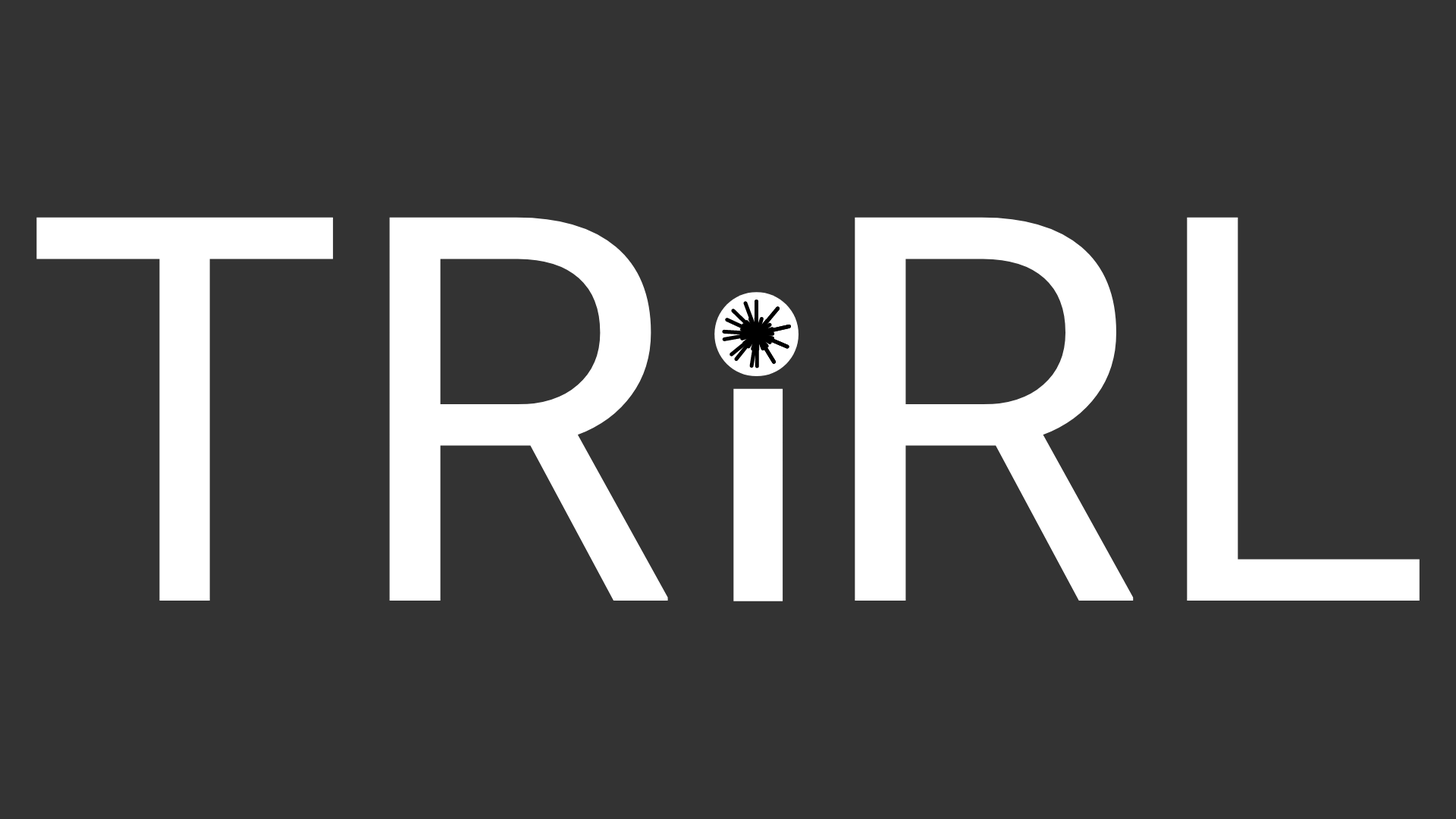
<style>
.page{position:relative;width:1456px;height:819px;background:#333333}
.page>*{position:absolute;margin:0}
.t1{font:539px "Roboto-Regular";color:#ffffff}
</style>
<div class="page">
<p class="t1" style="left:36px;top:217px;width:1384px;height:384px">TR RL</p>
</div>
